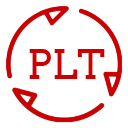
<style>
.page{position:relative;width:128px;height:128px;background:#ffffff}
.page>*{position:absolute;margin:0}
.t1{font:40px "Arvo";color:#cc0000}
</style>
<div class="page">
<p class="t1" style="left:29px;top:49px;width:76px;height:30px">PLT</p>
</div>
